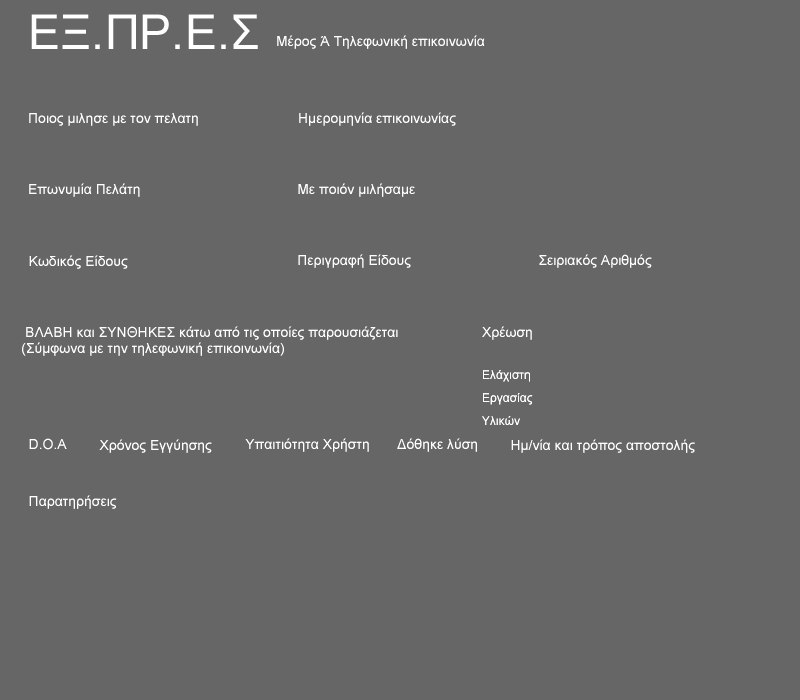
<style>
.page{position:relative;width:800px;height:700px;background:#666666}
.page>*{position:absolute;margin:0}
.t1{font:48px "ArialMT";color:#ffffff}
.t2{font:14px "ArialMT";color:#ffffff}
.t3{font:12px "ArialMT";color:#ffffff}
</style>
<div class="page">
<p class="t1" style="left:31px;top:14px;width:227px;height:35px">ΕΞ.ΠΡ.Ε.Σ</p>
<p class="t2" style="left:277px;top:35px;width:208px;height:14px">Μέρος Ά Τηλεφωνική επικοινωνία</p>
<p class="t2" style="left:29px;top:113px;width:169px;height:13px">Ποιος μιλησε με τον πελατη</p>
<p class="t2" style="left:299px;top:112px;width:157px;height:14px">Ημερομηνία επικοινωνίας</p>
<p class="t2" style="left:29px;top:183px;width:111px;height:14px">Επωνυμία Πελάτη</p>
<p class="t2" style="left:298px;top:183px;width:117px;height:14px">Με ποιόν μιλήσαμε</p>
<p class="t2" style="left:29px;top:255px;width:99px;height:14px">Κωδικός Είδους</p>
<p class="t2" style="left:298px;top:254px;width:113px;height:14px">Περιγραφή Είδους</p>
<p class="t2" style="left:539px;top:254px;width:113px;height:14px">Σειριακός Αριθμός</p>
<p class="t2" style="left:22px;top:326px;width:376px;height:30px">ΒΛΑΒΗ και ΣΥΝΘΗΚΕΣ κάτω από τις οποίες παρουσιάζεται (Σύμφωνα με την τηλεφωνική επικοινωνία)</p>
<p class="t2" style="left:482px;top:326px;width:50px;height:14px">Χρέωση</p>
<p class="t3" style="left:483px;top:370px;width:47px;height:12px">Ελάχιστη</p>
<p class="t3" style="left:483px;top:393px;width:50px;height:12px">Εργασίας</p>
<p class="t3" style="left:482px;top:416px;width:38px;height:9px">Υλικών</p>
<p class="t2" style="left:29px;top:438px;width:38px;height:12px">D.O.A</p>
<p class="t2" style="left:245px;top:438px;width:124px;height:14px">Υπαιτιότητα Χρήστη</p>
<p class="t2" style="left:397px;top:438px;width:80px;height:14px">Δόθηκε λύση</p>
<p class="t2" style="left:99px;top:439px;width:113px;height:14px">Χρόνος Εγγύησης</p>
<p class="t2" style="left:511px;top:439px;width:184px;height:14px">Ημ/νία και τρόπος αποστολής</p>
<p class="t2" style="left:29px;top:495px;width:88px;height:14px">Παρατηρήσεις</p>
</div>
